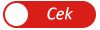
<style>
.page{position:relative;width:100px;height:30px;background:#d91e18}
.page>*{position:absolute;margin:0}
.t1{font:18px "Calibri-Italic";color:#ffffff}
</style>
<div class="page">
<p class="t1" style="left:47px;top:7px;width:26px;height:13px">Cek</p>
</div>
